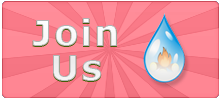
<style>
.page{position:relative;width:220px;height:110px}
.page>*{position:absolute;margin:0}
.t1{font:36px/24px "Verdana-Bold";letter-spacing:0.05em}
.t2{font:36px/24px "Verdana-Bold";letter-spacing:0.05em;color:#ffffff}
</style>
<div class="page">
<p class="t1" style="left:32px;top:19px;width:85px;height:63px;text-align:center">Join<br>Us</p>
<p class="t2" style="left:32px;top:18px;width:85px;height:63px;text-align:center">Join<br>Us</p>
</div>
